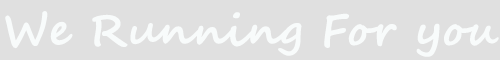
<style>
.page{position:relative;width:500px;height:60px;background:#e0e0e0}
.page>*{position:absolute;margin:0}
.t1{font:44px "SegoeScript-Bold";color:#f8fbfb}
</style>
<div class="page">
<p class="t1" style="left:5px;top:11px;width:494px;height:46px">We Running For you</p>
</div>
